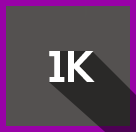
<style>
.page{position:relative;width:136px;height:132px;background:#545150}
.page>*{position:absolute;margin:0}
.t1{font:44px "NexaBold";color:#ffffff}
</style>
<div class="page">
<p class="t1" style="left:49px;top:51px;width:46px;height:31px">1K</p>
</div>
